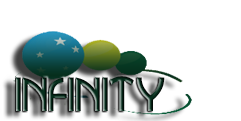
<style>
.page{position:relative;width:241px;height:121px;background:#ffffff}
.page>*{position:absolute;margin:0}
.t1{font:44.5px "Busorama";scale:1.07 1}
</style>
<div class="page">
<p class="t1" style="left:16px;top:76px;width:149px;height:35px">INFINITY</p>
</div>
